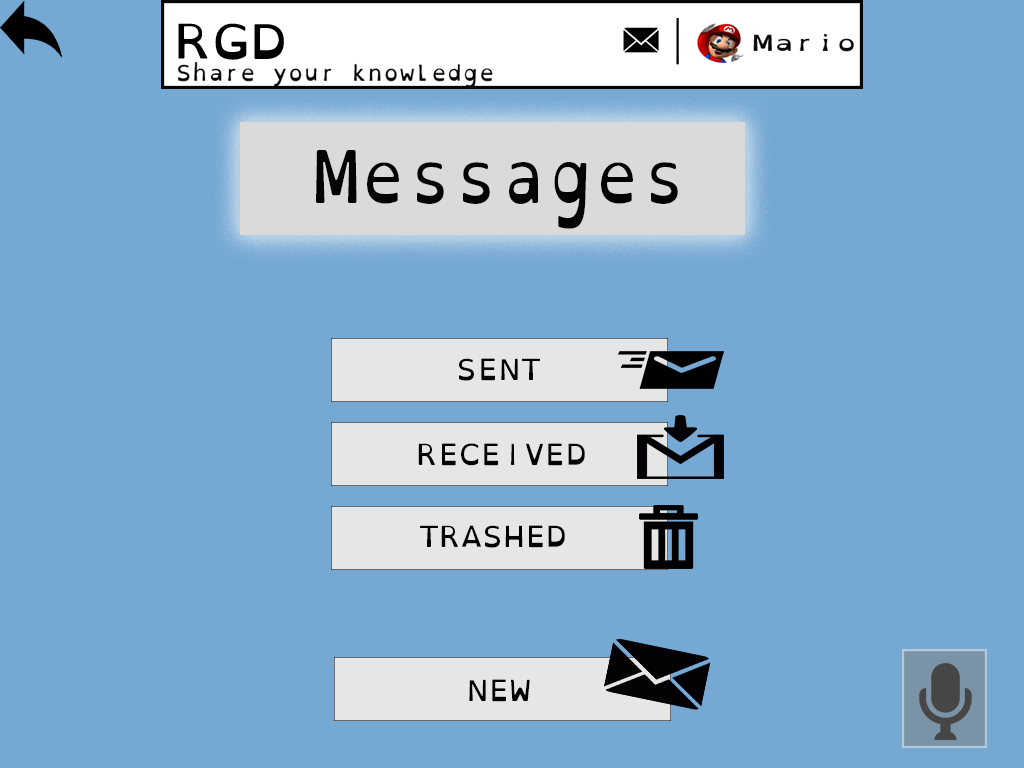
<style>
.page{position:relative;width:1024px;height:768px;background:#75a8d3}
.page>*{position:absolute;margin:0}
.t1{font:72.5px "OpenDyslexicMono-Regular";color:#030303;scale:0.88 1}
.t2{font:29.2px "OpenDyslexicMono-Regular";color:#030303}
</style>
<div class="page">
<p class="t1" style="left:316px;top:150px;width:362px;height:79px">Messages</p>
<p class="t2" style="left:459px;top:358px;width:81px;height:23px">SENT</p>
<p class="t2" style="left:418px;top:443px;width:167px;height:23px">RECEIVED</p>
<p class="t2" style="left:420px;top:525px;width:145px;height:23px">TRASHED</p>
<p class="t2" style="left:469px;top:679px;width:61px;height:23px">NEW</p>
</div>
